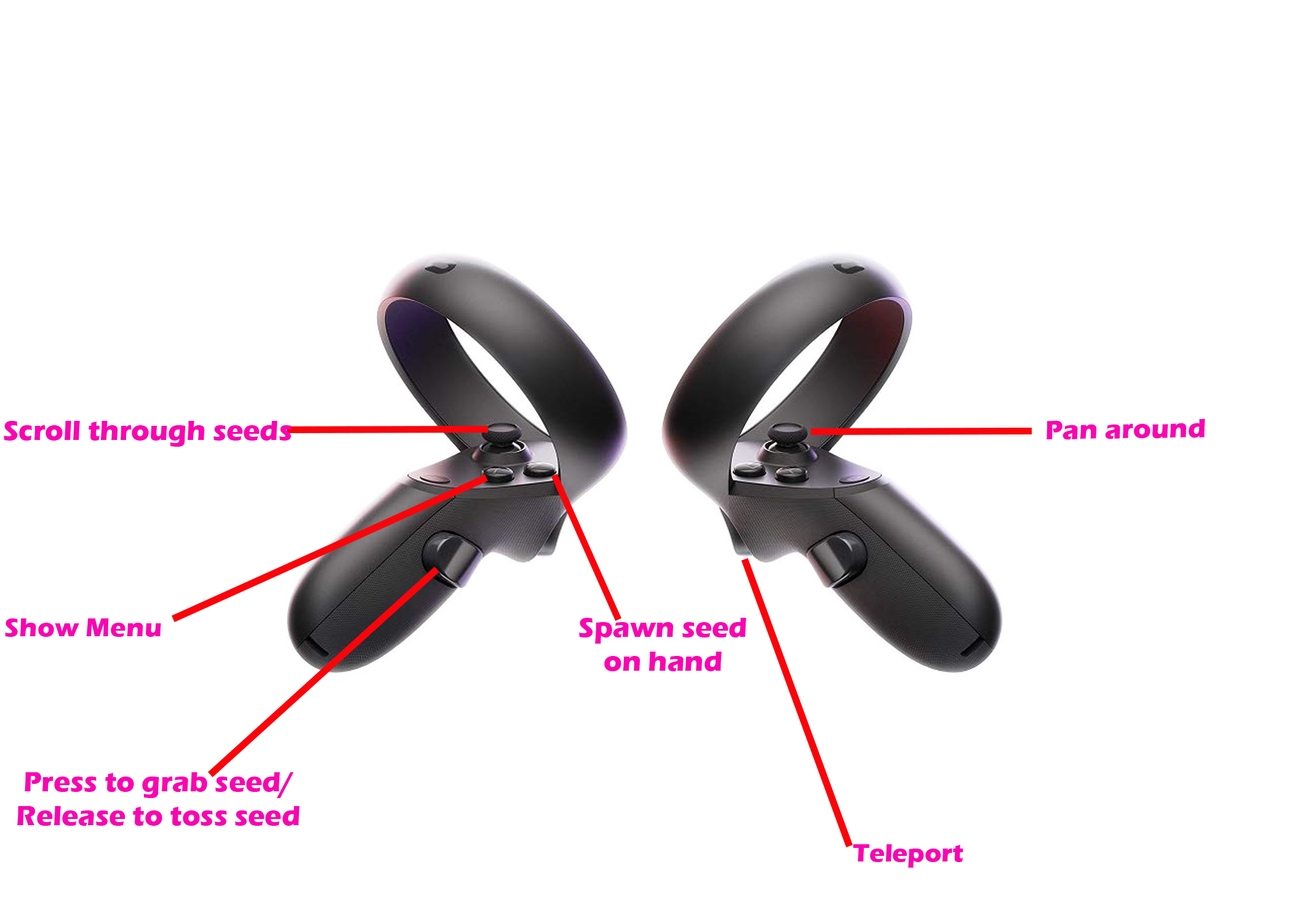
<style>
.page{position:relative;width:1292px;height:923px;background:#ffffff}
.page>*{position:absolute;margin:0}
.t1{font:28.2px "ErasITC-Bold";color:#f805b0}
.t2{font:27.5px "ErasITC-Bold";color:#f805b0}
.t3{font:26.7px "ErasITC-Bold";color:#f805b0}
.t4{font:25.8px "ErasITC-Bold";color:#f805b0}
</style>
<div class="page">
<p class="t1" style="left:4px;top:421px;width:288px;height:26px">Scroll through seeds</p>
<p class="t2" style="left:1047px;top:418px;width:158px;height:22px;rotate:-1deg">Pan around</p>
<p class="t1" style="left:579px;top:618px;width:167px;height:53px;text-align:center">Spawn seed on hand</p>
<p class="t3" style="left:5px;top:618px;width:156px;height:19px">Show Menu</p>
<p class="t1" style="left:17px;top:772px;width:283px;height:54px;text-align:center">Press to grab seed/<br>Release to toss seed</p>
<p class="t4" style="left:853px;top:844px;width:111px;height:24px">Teleport</p>
</div>
